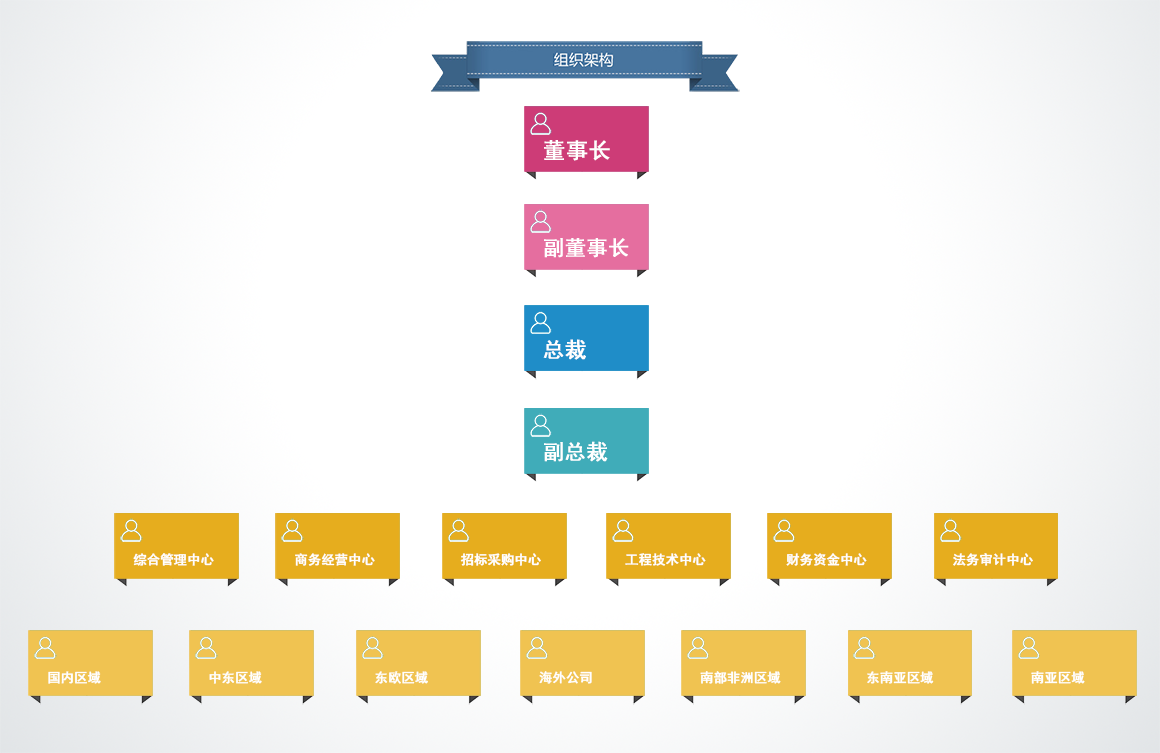
<style>
.page{position:relative;width:1160px;height:753px;background:#ffffff}
.page>*{position:absolute;margin:0}
.t1{font:22.1px "SimHei";color:#ffffff;font-weight:bold}
.t2{font:21px "SimHei";color:#ffffff;font-weight:bold}
.t3{font:21.2px "SimHei";color:#ffffff;font-weight:bold}
.t4{font:13px "SimHei";color:#ffffff;font-weight:bold}
</style>
<div class="page">
<p class="t1" style="left:544px;top:140px;width:66px;height:21px">董事长</p>
<p class="t2" style="left:544px;top:238px;width:85px;height:20px">副董事长</p>
<p class="t3" style="left:543px;top:339px;width:43px;height:21px">总裁</p>
<p class="t2" style="left:544px;top:441px;width:64px;height:21px">副总裁</p>
<p class="t4" style="left:133px;top:553px;width:81px;height:13px">综合管理中心</p>
<p class="t4" style="left:295px;top:553px;width:80px;height:13px">商务经营中心</p>
<p class="t4" style="left:460px;top:553px;width:81px;height:13px">招标采购中心</p>
<p class="t4" style="left:625px;top:553px;width:81px;height:13px">工程技术中心</p>
<p class="t4" style="left:786px;top:553px;width:81px;height:13px">财务资金中心</p>
<p class="t4" style="left:953px;top:553px;width:80px;height:13px">法务审计中心</p>
<p class="t4" style="left:48px;top:671px;width:53px;height:13px">国内区域</p>
<p class="t4" style="left:209px;top:671px;width:53px;height:13px">中东区域</p>
<p class="t4" style="left:375px;top:671px;width:53px;height:13px">东欧区域</p>
<p class="t4" style="left:539px;top:671px;width:53px;height:13px">海外公司</p>
<p class="t4" style="left:700px;top:671px;width:81px;height:13px">南部非洲区域</p>
<p class="t4" style="left:867px;top:671px;width:67px;height:13px">东南亚区域</p>
<p class="t4" style="left:1031px;top:671px;width:54px;height:13px">南亚区域</p>
</div>
